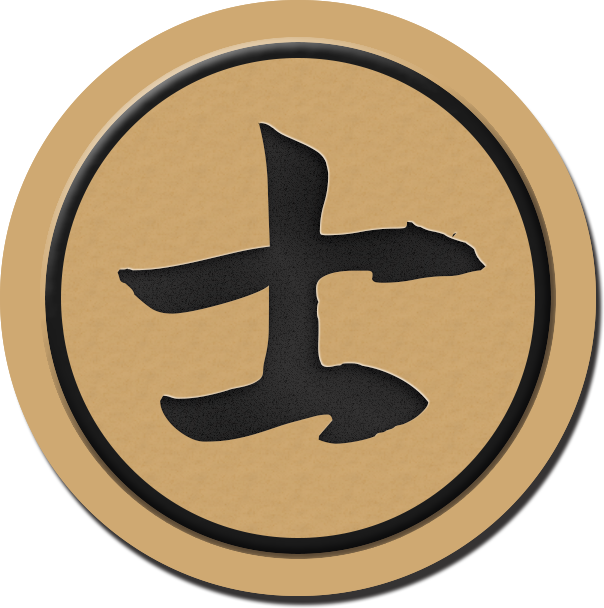
<style>
.page{position:relative;width:604px;height:608px;background:#ffffff}
.page>*{position:absolute;margin:0}
.t1{font:416.7px "AaYuwenlaoshidezi";letter-spacing:0.04em;color:#1b1b1b}
</style>
<div class="page">
<p class="t1" style="left:117px;top:122px;width:369px;height:322px">士</p>
<p class="t1" style="left:117px;top:122px;width:369px;height:322px">士</p>
<p class="t1" style="left:117px;top:122px;width:369px;height:322px">士</p>
<p class="t1" style="left:117px;top:122px;width:369px;height:322px">士</p>
<p class="t1" style="left:117px;top:122px;width:369px;height:322px">士</p>
</div>
